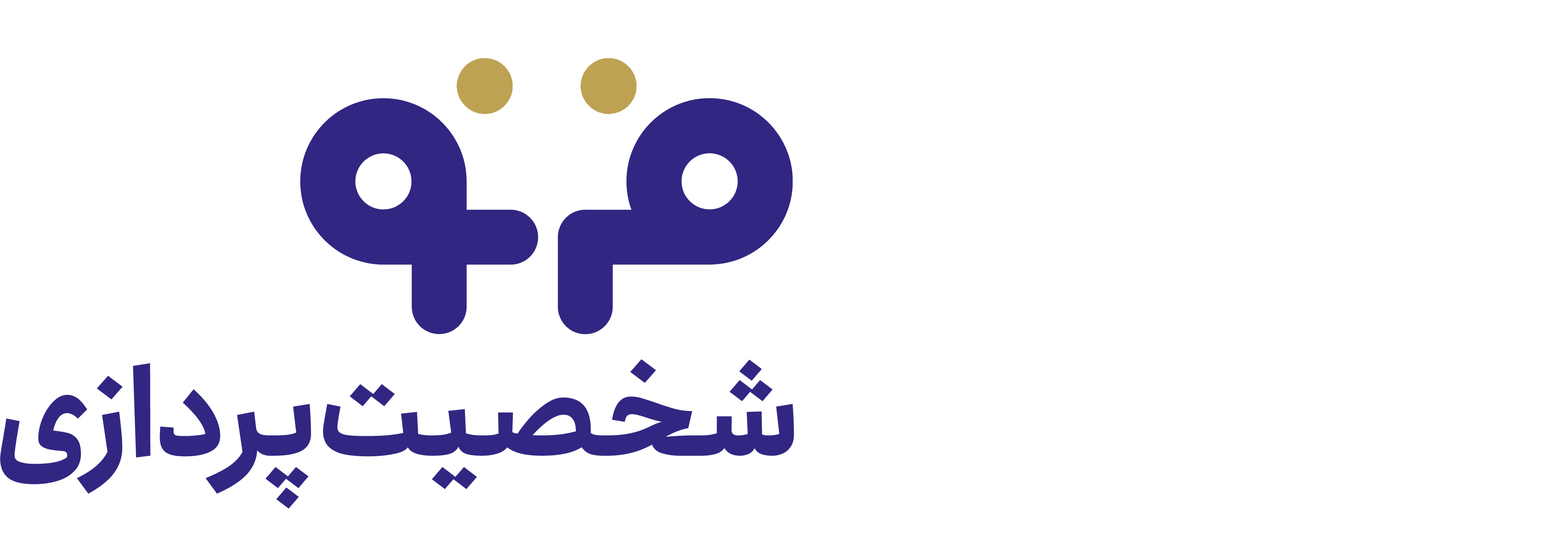
<style>
.page{position:relative;width:1568px;height:553px;background:#ffffff}
.page>*{position:absolute;margin:0}
.t1{font:121.1px "Anjoman-Bold";letter-spacing:-0.02em;color:#312783;scale:1.06 1}
</style>
<div class="page">
<p class="t1" style="left:0px;top:359px;width:794px;height:150px">شخصیت‌پردازی</p>
</div>
